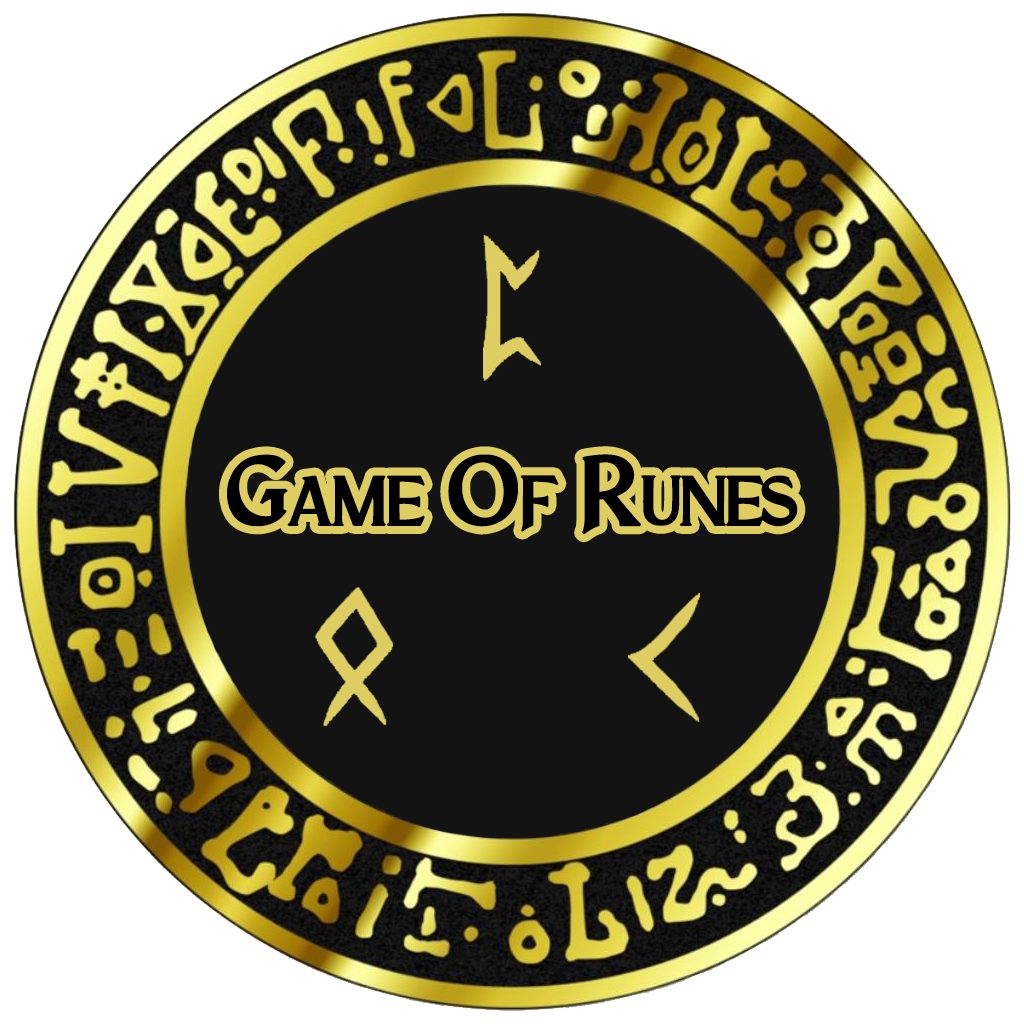
<style>
.page{position:relative;width:1024px;height:1024px;background:#131313}
.page>*{position:absolute;margin:0}
.t1{font:105px "DragonFire";color:#000000;font-variant:small-caps;font-weight:bold}
</style>
<div class="page">
<p class="t1" style="left:227px;top:454px;width:571px;height:81px">Game Of Runes</p>
</div>
